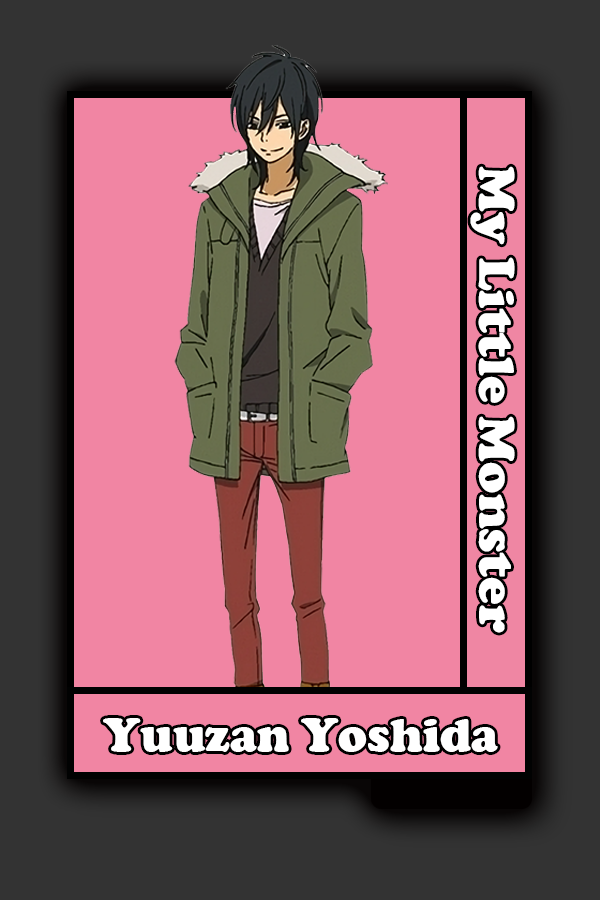
<style>
.page{position:relative;width:600px;height:900px;background:#f185a3}
.page>*{position:absolute;margin:0}
.t1{font:52px "CooperBlack";color:#ffffff}
.t2{font:47.9px "CooperBlack";color:#ffffff}
</style>
<div class="page">
<p class="t1" style="left:470px;top:166px;width:45px;height:467px;rotate:90deg">My Little Monster</p>
<p class="t2" style="left:103px;top:718px;width:395px;height:34px">Yuuzan Yoshida</p>
</div>
